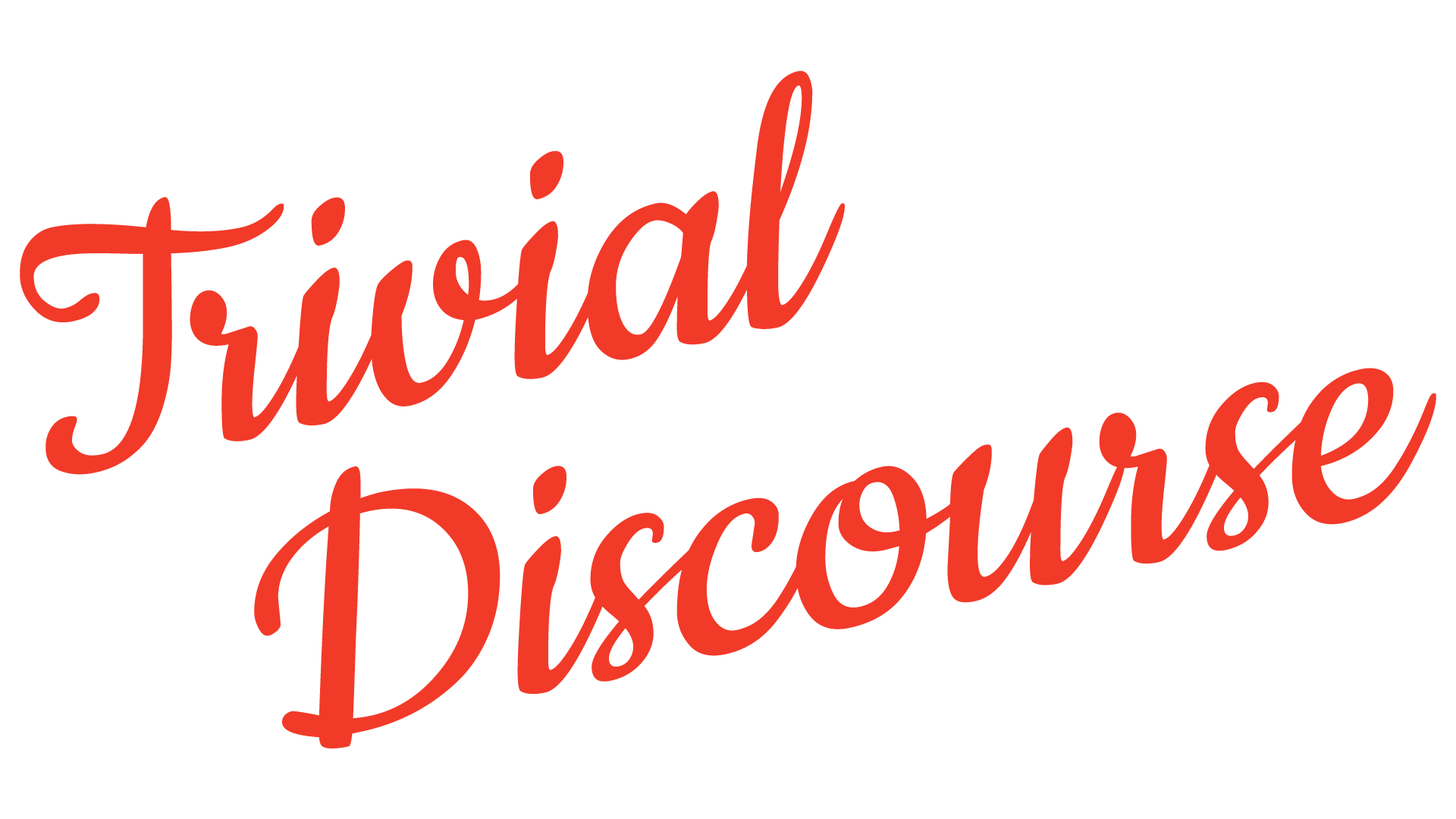
<style>
.page{position:relative;width:1456px;height:819px;background:#ffffff}
.page>*{position:absolute;margin:0}
.t1{font:416.1px "Cookie-Regular";color:#f23a29}
</style>
<div class="page">
<p class="t1" style="left:20px;top:71px;width:825px;height:404px;rotate:-12deg">Trivial</p>
<p class="t1" style="left:254px;top:368px;width:1182px;height:380px;rotate:-12deg">Discourse</p>
</div>
